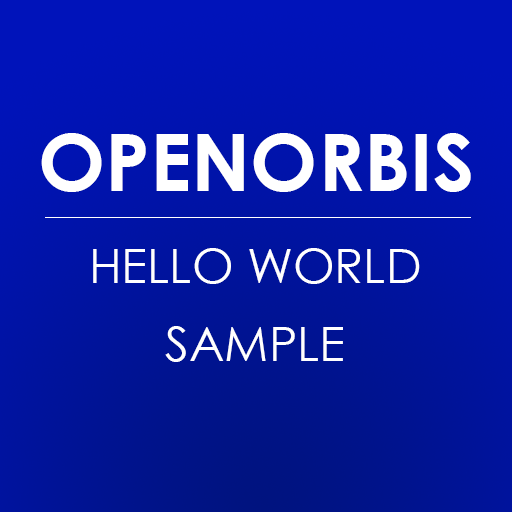
<style>
.page{position:relative;width:512px;height:512px}
.page>*{position:absolute;margin:0}
.t1{font:80px "CenturyGothic-Bold";color:#ffffff;text-transform:uppercase}
.t2{font:48px/26px "CenturyGothic";color:#ffffff;text-transform:uppercase}
</style>
<div class="page">
<p class="t1" style="left:41px;top:133px;width:430px;height:59px">OpenOrbis</p>
<p class="t2" style="left:93px;top:248px;width:327px;height:114px;text-align:center">Hello World<br><br><br>Sample</p>
</div>
